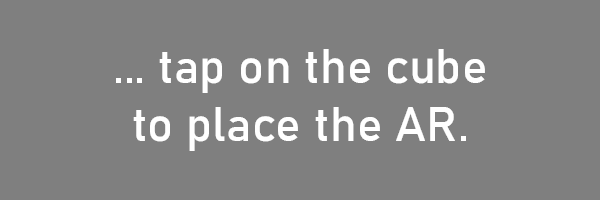
<style>
.page{position:relative;width:600px;height:200px;background:#7f7f7f}
.page>*{position:absolute;margin:0}
.t1{font:48px "Bahnschrift";color:#ffffff;font-weight:bold}
</style>
<div class="page">
<p class="t1" style="left:116px;top:49px;width:369px;height:102px;text-align:center">... tap on the cube<br>to place the AR.</p>
</div>
